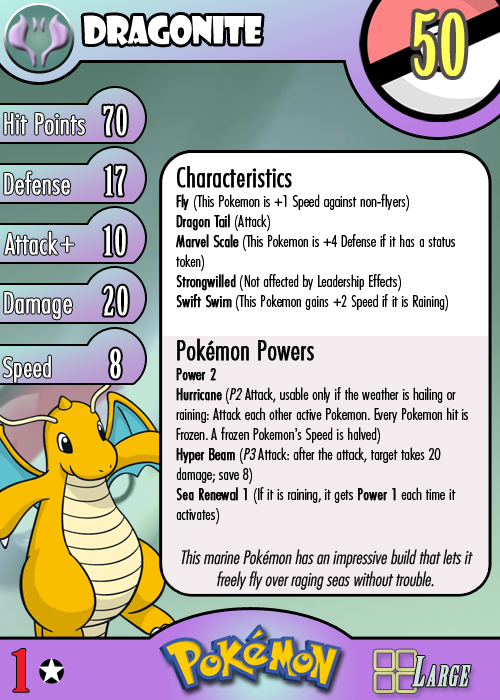
<style>
.page{position:relative;width:500px;height:700px}
.page>*{position:absolute;margin:0}
.t1{font:36.7px "ShowcardGothic-Reg";letter-spacing:-0.025em;color:#ffffff;scale:0.91 1}
.t2{font:83.3px "BirchStd";letter-spacing:0.025em;color:#fffd59;font-weight:bold}
.t3{font:27.8px "Futura-CondensedLight";color:#ffffff;font-weight:bold}
.t4{font:38.9px "BirchStd";letter-spacing:0.035em;color:#ffffff;font-weight:bold}
.t5{font:16.7px "FuturaCondensedBQ-Light";color:#010101}
.t6{font:27.8px "FuturaCondensedBQ-Light";color:#010101;font-weight:bold}
.t7{font:16.7px "FuturaCondensedBQ-Light";color:#010101;font-weight:bold}
.t8{font:16.7px "FuturaCondensedBQ-Light";color:#010101;font-style:italic}
.t9{font:30.6px "Futura-CondensedLight";color:#ffffff;font-weight:bold}
.t10{font:27.8px "FuturaCondensedBQ-Light";color:#ffffff;font-weight:bold}
.t11{font:18.1px "Futura-CondensedLight";color:#010101;font-style:italic}
.t12{font:55.6px "BirchStd";color:#ed1c24;font-weight:bold;scale:1.5 1}
</style>
<div class="page">
<p class="t1" style="left:83px;top:15px;width:179px;height:31px">dragonite</p>
<p class="t2" style="left:414px;top:12px;width:51px;height:64px">50</p>
<p class="t3" style="left:4px;top:113px;width:81px;height:22px">Hit Points</p>
<p class="t4" style="left:103px;top:105px;width:24px;height:31px">70</p>
<p class="t3" style="left:4px;top:171px;width:66px;height:24px">Defense</p>
<p class="t4" style="left:105px;top:165px;width:21px;height:31px">17</p>
<p class="t5" style="left:176px;top:166px;width:292px;height:359px"><span class="t6">Characteristics<br></span><span class="t7">Fly </span>(This Pokemon is +1 Speed against non-flyers)<br><span class="t7">Dragon Tail</span> (Attack)<br><span class="t7">Marvel Scale</span> (This Pokemon is +4 Defense if it has a status token)<br><span class="t7">Strongwilled</span> (Not affected by Leadership Effects)<br><span class="t7">Swift Swim</span> (This Pokemon gains +2 Speed if it is Raining)<br><br><span class="t6">Pokémon Powers<br></span><span class="t7">Power 2<br>Hurricane</span> (<span class="t8">P2</span> Attack, usable only if the weather is hailing or raining: Attack each other active Pokemon. Every Pokemon hit is Frozen. A frozen Pokemon’s Speed is halved)<br><span class="t7">Hyper Beam</span> (<span class="t8">P3</span> Attack: after the attack, target takes 20 damage; save 8)<br><span class="t7">Sea Renewal 1</span> (If it is raining, it gets <span class="t7">Power 1</span> each time it activates)</p>
<p class="t3" style="left:4px;top:231px;width:54px;height:24px">Attack</p>
<p class="t4" style="left:104px;top:225px;width:22px;height:31px">10</p>
<p class="t9" style="left:60px;top:236px;width:14px;height:17px">+</p>
<p class="t3" style="left:4px;top:292px;width:68px;height:28px">Damage</p>
<p class="t4" style="left:103px;top:285px;width:25px;height:31px">20</p>
<p class="t4" style="left:110px;top:348px;width:11px;height:31px">8</p>
<p class="t10" style="left:3px;top:355px;width:48px;height:28px">Speed</p>
<p class="t11" style="left:181px;top:549px;width:292px;height:41px;text-align:center">This marine Pokémon has an impressive build that lets it freely fly over raging seas without trouble.</p>
<p class="t12" style="left:12px;top:649px;width:17px;height:43px">1</p>
</div>
